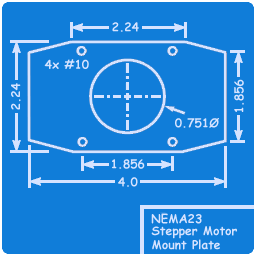
<style>
.page{position:relative;width:256px;height:256px;background:#107dd9}
.page>*{position:absolute;margin:0}
.t1{font:12px "ComicSansMS-Bold";color:#d6e3ff}
</style>
<div class="page">
<p class="t1" style="left:112px;top:22px;width:27px;height:10px">2.24</p>
<p class="t1" style="left:44px;top:59px;width:45px;height:10px">4x #10</p>
<p class="t1" style="left:11px;top:83px;width:10px;height:27px;rotate:-90deg">2.24</p>
<p class="t1" style="left:234px;top:79px;width:10px;height:33px;rotate:-90deg">1.856</p>
<p class="t1" style="left:175px;top:118px;width:44px;height:10px">0.751Ø</p>
<p class="t1" style="left:112px;top:159px;width:33px;height:10px">1.856</p>
<p class="t1" style="left:118px;top:177px;width:20px;height:10px">4.0</p>
<p class="t1" style="left:151px;top:213px;width:51px;height:11px">NEMA23</p>
<p class="t1" style="left:151px;top:226px;width:86px;height:13px">Stepper Motor</p>
<p class="t1" style="left:152px;top:239px;width:68px;height:11px">Mount Plate</p>
</div>
